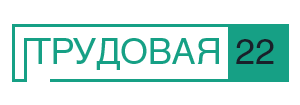
<style>
.page{position:relative;width:300px;height:105px;background:#ffffff}
.page>*{position:absolute;margin:0}
.t1{font:36px "HelveticaCyr-Upright";color:#16a085}
.t2{font:36px "HelveticaCyr-Upright";color:#19202a}
</style>
<div class="page">
<p class="t1" style="left:29px;top:38px;width:190px;height:32px">ТРУДОВАЯ</p>
<p class="t2" style="left:236px;top:39px;width:38px;height:25px">22</p>
</div>
